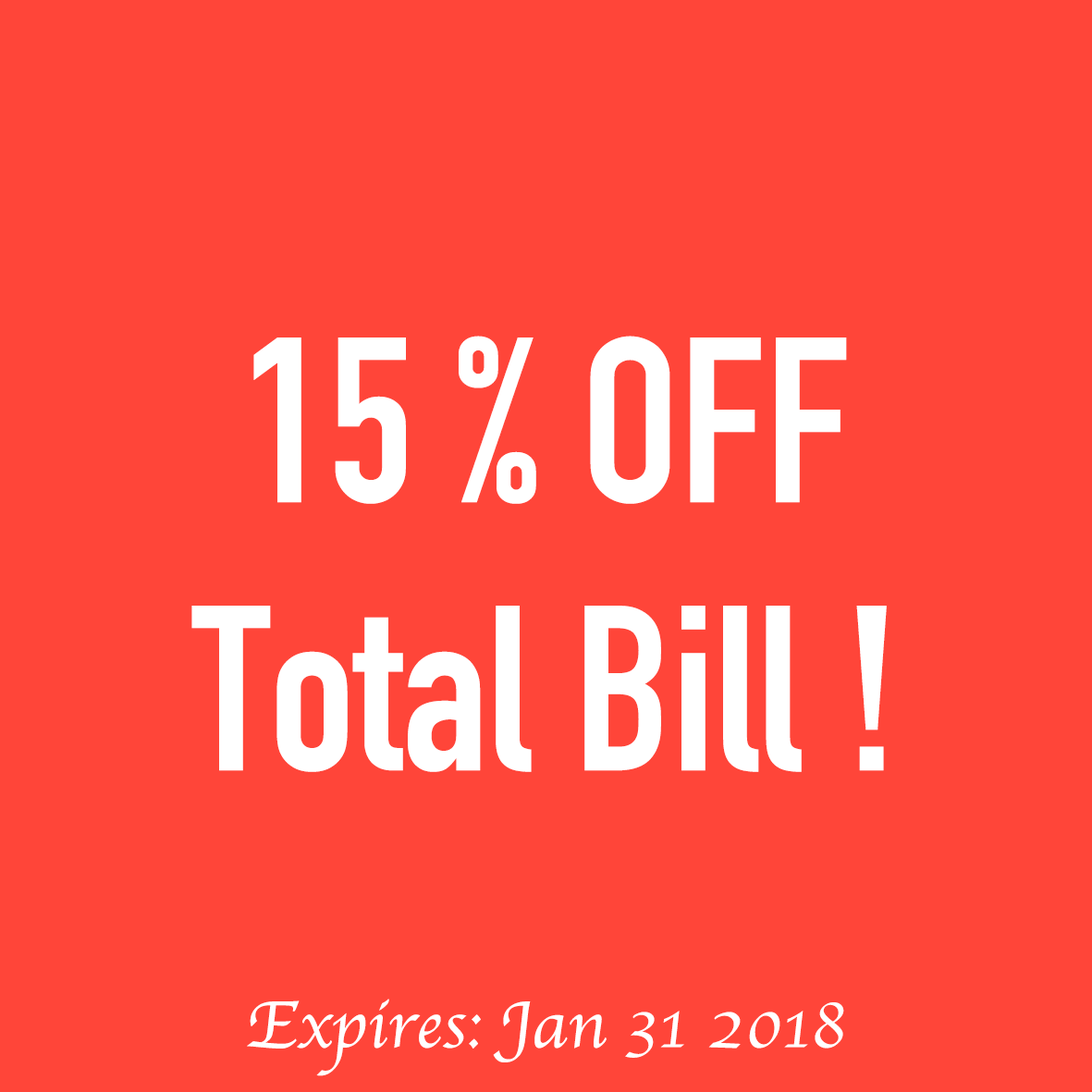
<style>
.page{position:relative;width:1092px;height:1092px;background:#ff4539}
.page>*{position:absolute;margin:0}
.t1{font:231.2px "DINCondensed-Bold";color:#ffffff}
.t2{font:69.3px "Apple-Chancery";color:#ffffff}
</style>
<div class="page">
<p class="t1" style="left:253px;top:336px;width:594px;height:168px">15 % OFF</p>
<p class="t1" style="left:191px;top:606px;width:696px;height:166px">Total Bill !</p>
<p class="t2" style="left:247px;top:999px;width:597px;height:77px">Expires: Jan 31 2018</p>
</div>
